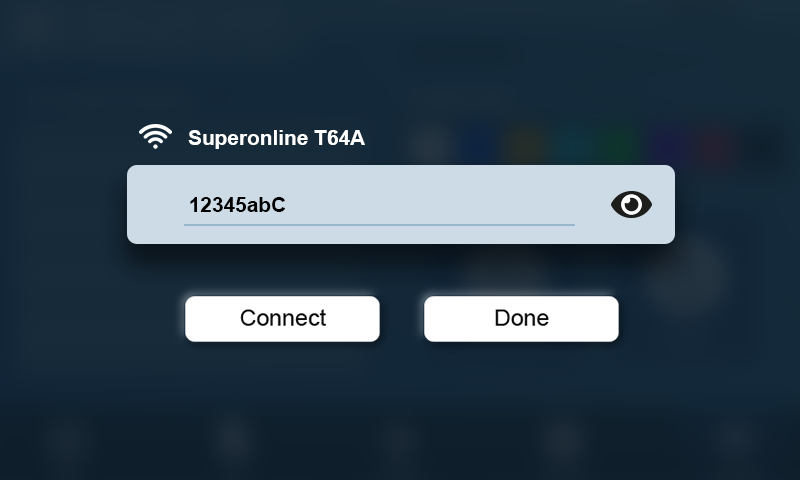
<style>
.page{position:relative;width:800px;height:480px}
.page>*{position:absolute;margin:0}
.t1{font:20.8px "Arial-BoldMT";color:#ffffff}
.t2{font:20.8px "Arial-BoldMT";color:#000000}
</style>
<div class="page">
<p class="t1" style="left:188px;top:130px;width:177px;height:19px">Superonline T64A</p>
<p class="t2" style="left:190px;top:197px;width:95px;height:15px">12345abC</p>
</div>
